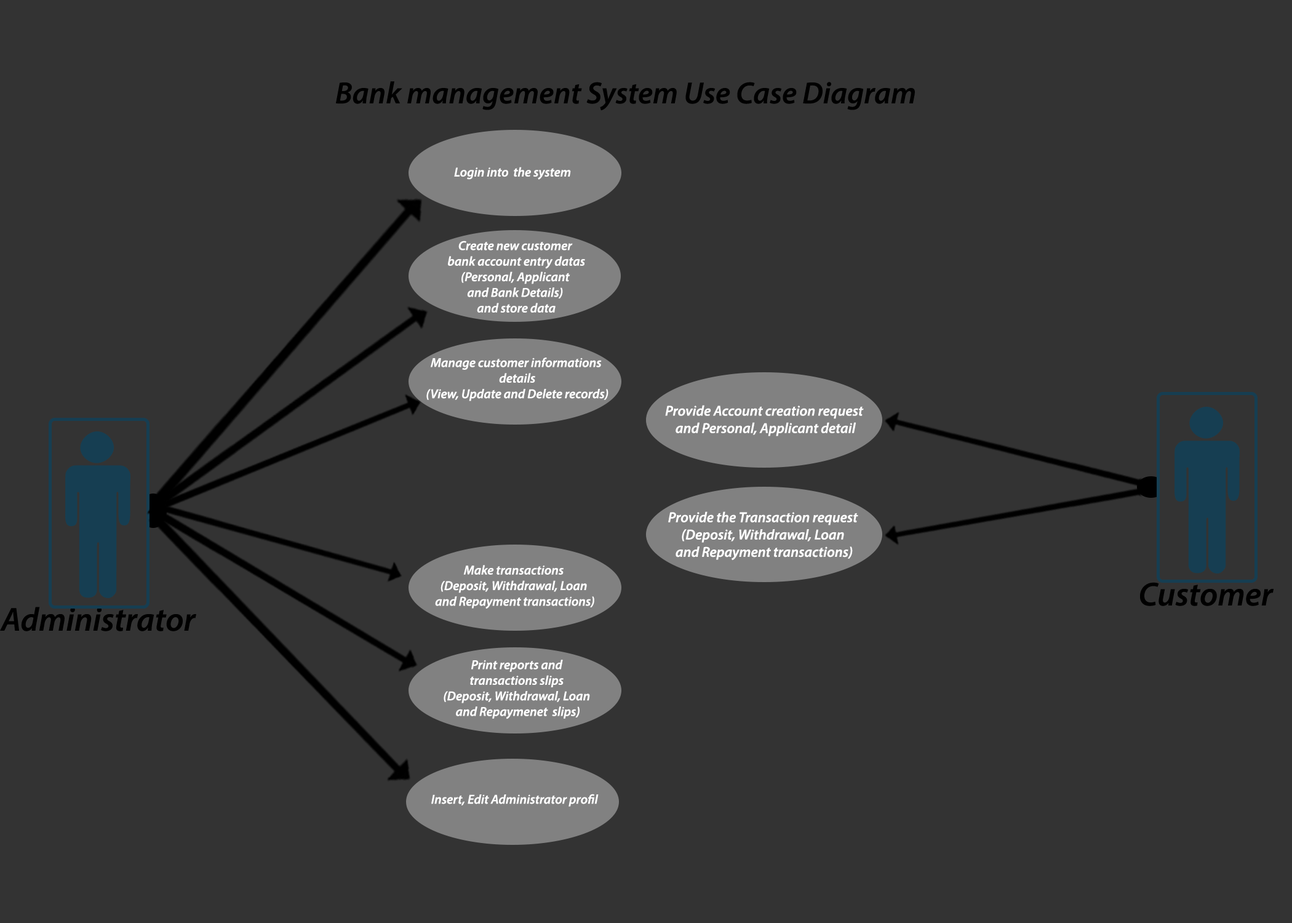
<style>
.page{position:relative;width:1292px;height:923px;background:#333333}
.page>*{position:absolute;margin:0}
.t1{font:30.8px "MyriadConceptItalic-SemiboldItalic";color:#000000;font-weight:bold}
.t2{font:13px "MyriadConceptItalic-SemiboldItalic";color:#ffffff;font-weight:bold}
.t3{font:14.4px "MyriadConceptItalic-SemiboldItalic";color:#ffffff;font-weight:bold}
.t4{font:33.4px "MyriadConceptItalic-SemiboldItalic";color:#000000;font-weight:bold}
</style>
<div class="page">
<p class="t1" style="left:336px;top:81px;width:579px;height:30px">Bank management System Use Case Diagram</p>
<p class="t2" style="left:454px;top:167px;width:117px;height:13px">Login into  the system</p>
<p class="t2" style="left:448px;top:241px;width:137px;height:72px;text-align:center">Create new customer <br>bank account entry datas<br>(Personal, Applicant <br>and Bank Details) <br>and store data</p>
<p class="t2" style="left:426px;top:357px;width:182px;height:44px;text-align:center">Manage customer informations <br>details<br>(View, Update and Delete records)</p>
<p class="t3" style="left:665px;top:405px;width:199px;height:31px;text-align:center">Provide Account creation request<br> and Personal, Applicant detail</p>
<p class="t3" style="left:668px;top:511px;width:190px;height:50px;text-align:center">Provide the Transaction request<br>(Deposit, Withdrawal, Loan<br> and Repayment transactions)</p>
<p class="t2" style="left:435px;top:565px;width:159px;height:44px;text-align:center">Make transactions<br>(Deposit, Withdrawal, Loan<br> and Repayment transactions)</p>
<p class="t4" style="left:1140px;top:582px;width:134px;height:24px">Customer</p>
<p class="t4" style="left:0px;top:607px;width:196px;height:24px">Administrator</p>
<p class="t2" style="left:444px;top:660px;width:146px;height:59px;text-align:center">Print reports and<br>transactions slips<br>(Deposit, Withdrawal, Loan<br> and Repaymenet  slips)</p>
<p class="t2" style="left:431px;top:794px;width:168px;height:13px">Insert, Edit Administrator profil</p>
</div>
